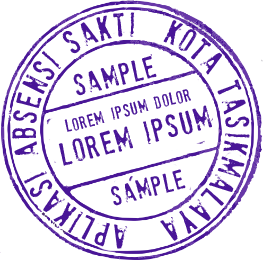
<style>
.page{position:relative;width:263px;height:260px;background:#ffffff}
.page>*{position:absolute;margin:0}
.t1{font:29.3px "StamPete";letter-spacing:0.08em;color:#491697;text-transform:uppercase}
.t2{font:26.3px "StamPete";letter-spacing:0.08em;color:#491697;text-transform:uppercase}
.t3{font:15.3px "StamPete";letter-spacing:0.08em;color:#491697;text-transform:uppercase}
.t4{font:28px "StamPete";letter-spacing:0.08em;color:#491697;text-transform:uppercase}
.t5{font:23.6px "StamPete";letter-spacing:0.08em;color:#491697;text-transform:uppercase}
</style>
<div class="page">
<p class="t1" style="left:12px;top:12px;width:238px;height:237px;rotate:178deg">aplikasi ABSENSI SAKTI  kota tasikmalaya</p>
<p class="t2" style="left:73px;top:56px;width:84px;height:40px;rotate:-14deg">SAMPLE</p>
<p class="t3" style="left:64px;top:89px;width:127px;height:43px;rotate:-14deg">lOREM iPSUM DOLOR</p>
<p class="t4" style="left:58px;top:105px;width:154px;height:61px;rotate:-14deg">LOREM IPSUM</p>
<p class="t5" style="left:111px;top:169px;width:75px;height:37px;rotate:-14deg">SAMPLE</p>
</div>
